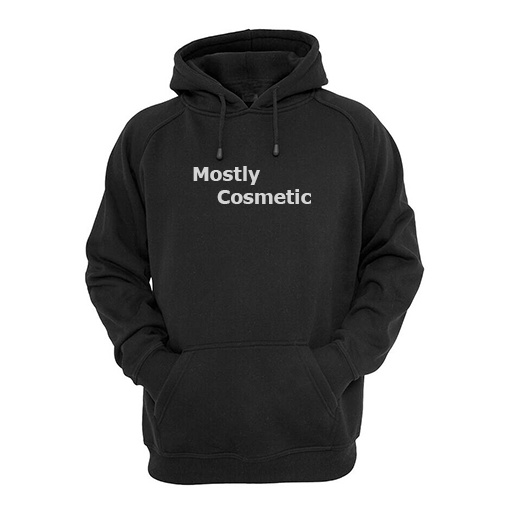
<style>
.page{position:relative;width:512px;height:512px;background:#ffffff}
.page>*{position:absolute;margin:0}
.t1{font:18.5px "Verdana-Bold";color:#f5f5f5}
</style>
<div class="page">
<p class="t1" style="left:193px;top:166px;width:118px;height:38px;text-align:center;opacity:0.78">Mostly<br>            Cosmetic</p>
</div>
